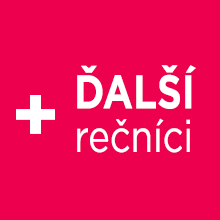
<style>
.page{position:relative;width:220px;height:220px;background:#ed004d}
.page>*{position:absolute;margin:0}
.t1{font:44.6px/43.4px "Gotham-Book";color:#ffffff;scale:0.82 1}
.t2{font:47.3px/43.4px "Gotham-Bold";color:#ffffff;scale:0.82 1}
</style>
<div class="page">
<p class="t1" style="left:77px;top:65px;width:119px;height:88px"><span class="t2">ĎALŠÍ<br></span>rečníci</p>
</div>
